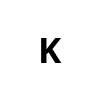
<style>
.page{position:relative;width:100px;height:100px;background:#ffffff}
.page>*{position:absolute;margin:0}
.t1{font:35px "OpenSans-Bold";color:#000000}
</style>
<div class="page">
<p class="t1" style="left:41px;top:38px;width:21px;height:25px">K</p>
</div>
